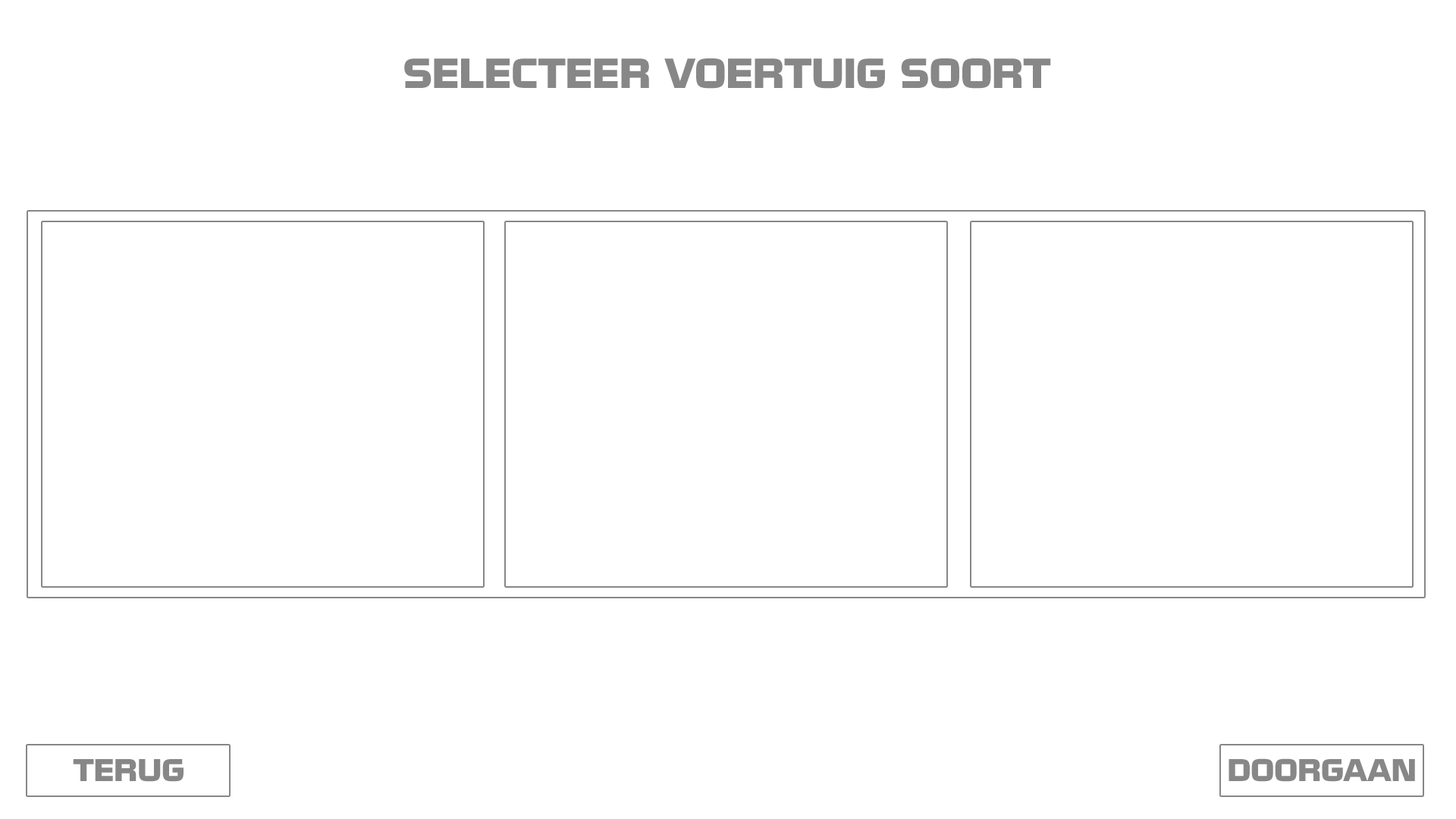
<style>
.page{position:relative;width:1456px;height:819px;background:#ffffff}
.page>*{position:absolute;margin:0}
.t1{font:36.4px "NissanOpti";color:#878787}
.t2{font:27.3px "NissanOpti";color:#878787}
</style>
<div class="page">
<p class="t1" style="left:404px;top:58px;width:647px;height:31px">SELECTEER VOERTUIG SOORT</p>
<p class="t2" style="left:73px;top:759px;width:111px;height:23px">TERUG</p>
<p class="t2" style="left:1228px;top:758px;width:187px;height:24px">DOORGAAN</p>
</div>
